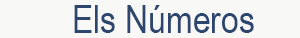
<style>
.page{position:relative;width:300px;height:38px;background:#f8f8f7}
.page>*{position:absolute;margin:0}
.t1{font:39px "ArialNarrow";color:#2d466d}
</style>
<div class="page">
<p class="t1" style="left:74px;top:5px;width:180px;height:28px">Els Números</p>
</div>
